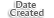
<style>
.page{position:relative;width:54px;height:18px;background:#ffffff}
.page>*{position:absolute;margin:0}
.t1{font:10px/8px "AmiraParadiso";color:#646464}
</style>
<div class="page">
<p class="t1" style="left:10px;top:1px;width:34px;height:15px;text-align:center">Date <br>Created</p>
</div>
